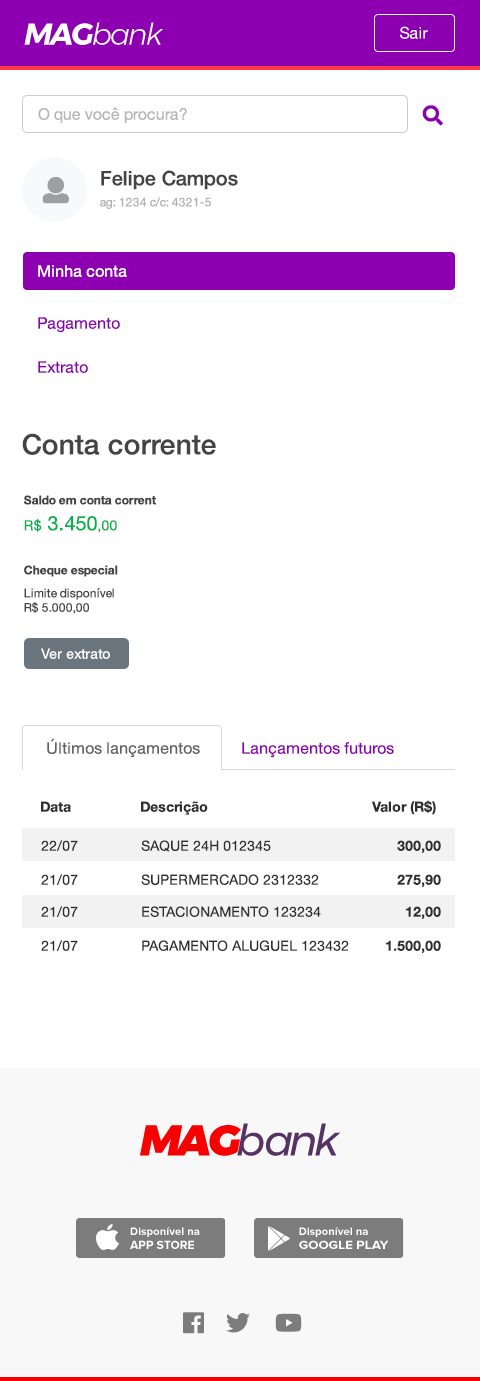
<style>
.page{position:relative;width:480px;height:1381px;background:#ffffff}
.page>*{position:absolute;margin:0}
.t1{font:30px "Montserrat-LightItalic";letter-spacing:-0.075em;color:#ffffff}
.t2{font:30px "Montserrat-BoldItalic";letter-spacing:-0.075em;color:#ffffff}
.t3{font:16px "HelveticaNeue";color:#ffffff}
.t4{font:16px "HelveticaNeue";color:#b6b6b6}
.t5{font:20px "HelveticaNeue-Medium";color:#444444}
.t6{font:12px "HelveticaNeue";color:#b1b1b1}
.t7{font:16px "HelveticaNeue";color:#8c00b2}
.t8{font:28px "HelveticaNeue-Medium";color:#444444}
.t9{font:12px "HelveticaNeue-Bold";color:#444444}
.t10{font:20px "HelveticaNeue";color:#00b048}
.t11{font:14px "HelveticaNeue";color:#00b048}
.t12{font:12px "HelveticaNeue";color:#444444}
.t13{font:14px "HelveticaNeue";color:#ffffff}
.t14{font:16px "HelveticaNeue";color:#626262}
.t15{font:14px "HelveticaNeue-Bold";color:#2f2f2f}
.t16{font:14px "HelveticaNeue";color:#2f2f2f}
.t17{font:43.4px "Montserrat-Italic";letter-spacing:-0.075em;color:#553363}
.t18{font:43.4px "Montserrat-BlackItalic";letter-spacing:-0.075em;color:#f90000}
</style>
<div class="page">
<p class="t1" style="left:24px;top:22px;width:140px;height:23px"><span class="t2">MAG</span>bank</p>
<p class="t3" style="left:400px;top:26px;width:28px;height:13px">Sair</p>
<p class="t4" style="left:38px;top:107px;width:149px;height:16px">O que você procura?</p>
<p class="t5" style="left:101px;top:170px;width:137px;height:20px">Felipe Campos</p>
<p class="t6" style="left:100px;top:197px;width:111px;height:12px">ag: 1234 c/c: 4321-5</p>
<p class="t3" style="left:38px;top:265px;width:89px;height:12px">Minha conta</p>
<p class="t7" style="left:38px;top:317px;width:82px;height:16px">Pagamento</p>
<p class="t7" style="left:38px;top:361px;width:50px;height:12px">Extrato</p>
<p class="t8" style="left:22px;top:433px;width:194px;height:22px">Conta corrente</p>
<p class="t9" style="left:24px;top:495px;width:132px;height:10px">Saldo em conta corrent</p>
<p class="t10" style="left:24px;top:516px;width:93px;height:17px"><span class="t11">R$ </span>3.450<span class="t11">,00</span></p>
<p class="t9" style="left:24px;top:565px;width:94px;height:12px">Cheque especial</p>
<p class="t12" style="left:24px;top:588px;width:90px;height:26px">Limite disponível<br>R$ 5.000,00</p>
<p class="t13" style="left:41px;top:648px;width:69px;height:11px">Ver extrato</p>
<p class="t14" style="left:47px;top:738px;width:153px;height:20px">Últimos lançamentos</p>
<p class="t7" style="left:242px;top:742px;width:152px;height:16px">Lançamentos futuros</p>
<p class="t15" style="left:41px;top:801px;width:30px;height:11px">Data</p>
<p class="t15" style="left:141px;top:801px;width:67px;height:14px">Descrição</p>
<p class="t15" style="left:372px;top:800px;width:64px;height:15px">Valor (R$)</p>
<p class="t16" style="left:41px;top:840px;width:37px;height:11px">22/07</p>
<p class="t16" style="left:141px;top:840px;width:130px;height:12px">SAQUE 24H 012345</p>
<p class="t15" style="left:397px;top:840px;width:44px;height:13px">300,00</p>
<p class="t16" style="left:41px;top:874px;width:37px;height:11px">21/07</p>
<p class="t16" style="left:141px;top:874px;width:178px;height:11px">SUPERMERCADO 2312332</p>
<p class="t15" style="left:397px;top:874px;width:44px;height:13px">275,90</p>
<p class="t16" style="left:41px;top:906px;width:37px;height:11px">21/07</p>
<p class="t16" style="left:142px;top:906px;width:179px;height:11px">ESTACIONAMENTO 123234</p>
<p class="t15" style="left:406px;top:906px;width:35px;height:13px">12,00</p>
<p class="t16" style="left:41px;top:940px;width:37px;height:11px">21/07</p>
<p class="t16" style="left:142px;top:940px;width:207px;height:11px">PAGAMENTO ALUGUEL 123432</p>
<p class="t15" style="left:386px;top:940px;width:55px;height:13px">1.500,00</p>
<p class="t17" style="left:140px;top:1123px;width:201px;height:33px"><span class="t18">MAG</span>bank</p>
</div>
